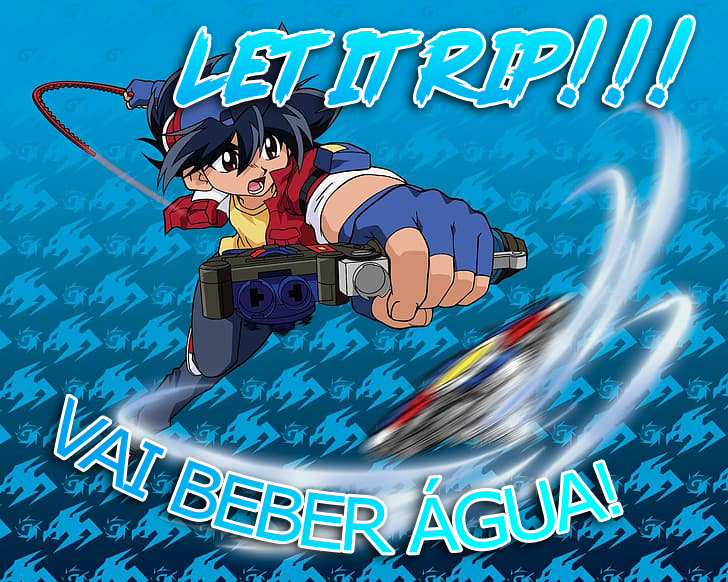
<style>
.page{position:relative;width:728px;height:582px}
.page>*{position:absolute;margin:0}
.t1{font:110px "PinkBlue";letter-spacing:-0.05em;color:#01cff6}
.t2{font:73px "Tahoma";letter-spacing:-0.05em}
</style>
<div class="page">
<p class="t1" style="left:176px;top:17px;width:518px;height:89px">LET IT RIP!!!</p>
<p class="t2" style="left:56px;top:396px;width:565px;height:157px;rotate:7deg">VAI BEBER ÁGUA!</p>
</div>
